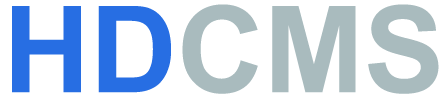
<style>
.page{position:relative;width:444px;height:100px;background:#ffffff}
.page>*{position:absolute;margin:0}
.t1{font:120.4px "Arial-BoldMT";color:#a9bbbe}
.t2{font:120.4px "Arial-BoldMT";color:#276ee3}
</style>
<div class="page">
<p class="t1" style="left:12px;top:4px;width:427px;height:90px"><span class="t2">HD</span>CMS</p>
</div>
